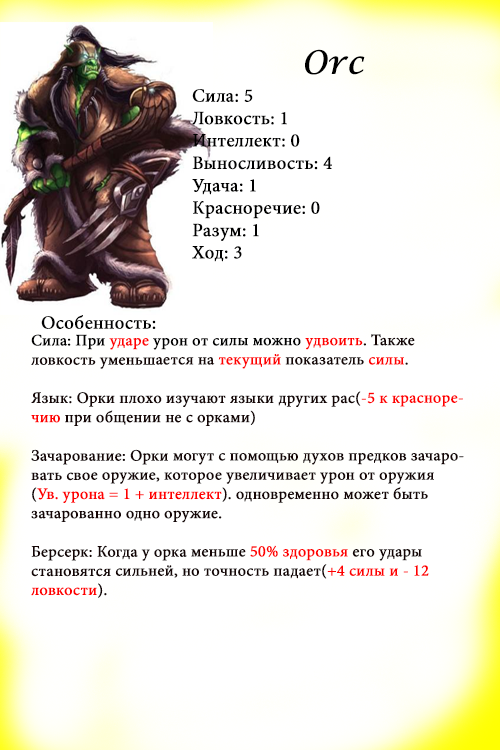
<style>
.page{position:relative;width:500px;height:750px;background:#ffffff}
.page>*{position:absolute;margin:0}
.t1{font:32px "LucidaCalligraphy-Italic";color:#000000;font-weight:bold}
.t2{font:18.7px "MinionPro-Regular";color:#000000;font-weight:bold}
.t3{font:16px "MinionPro-Regular";color:#150505;font-weight:bold}
.t4{font:16px "MinionPro-Regular";color:#000000;font-weight:bold}
.t5{font:16px "MinionPro-Regular";color:#ff0101;font-weight:bold}
.t6{font:16px "MinionPro-Regular";color:#fe0000;font-weight:bold}
.t7{font:16px "MinionPro-Regular";color:#ff0000;font-weight:bold}
</style>
<div class="page">
<p class="t1" style="left:305px;top:49px;width:60px;height:26px">Orc</p>
<p class="t2" style="left:192px;top:89px;width:140px;height:173px">Сила: 5<br>Ловкость: 1<br>Интеллект: 0<br>Выносливость: 4<br>Удача: 1<br>Красноречие: 0<br>Разум: 1<br>Ход: 3</p>
<p class="t2" style="left:41px;top:315px;width:115px;height:14px">Особенность:</p>
<p class="t3" style="left:31px;top:334px;width:433px;height:264px"><span class="t4">Сила: При </span><span class="t5">ударе</span><span class="t4"> урон от силы можно </span><span class="t6">удвоить</span>. Также <br>ловкость уменьшается на <span class="t6">текущий</span> показатель <span class="t7">силы</span>.<br><br>Язык: Орки плохо изучают языки других рас(<span class="t7">-5 к красноречию</span> при общении не с орками)<br><br>Зачарование: Орки могут с помощью духов предков зачаровать свое оружие, которое увеличивает урон от оружия<br>(<span class="t7">Ув. урона = 1 + интеллект</span>). одновременно может быть зачарованно одно оружие.<br><br>Берсерк: Когда у орка меньше <span class="t7">50% здоровья</span> его удары <br>становятся сильней, но точность падает(<span class="t7">+4 силы и - 12 ловкости</span>).</p>
</div>
